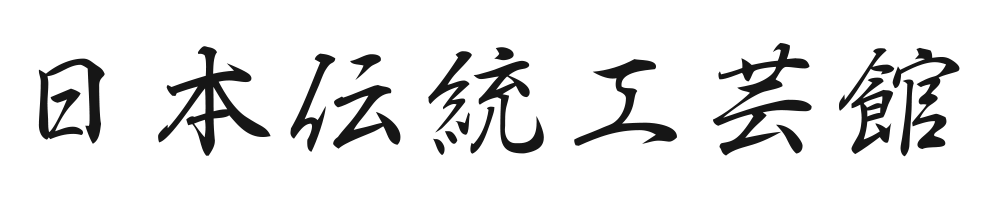
<style>
.page{position:relative;width:1000px;height:200px;background:#ffffff}
.page>*{position:absolute;margin:0}
.t1{font:125.2px "Gyoshokk-R";letter-spacing:0.1em;color:#161616}
</style>
<div class="page">
<p class="t1" style="left:38px;top:42px;width:922px;height:115px">日本伝統工芸館</p>
</div>
